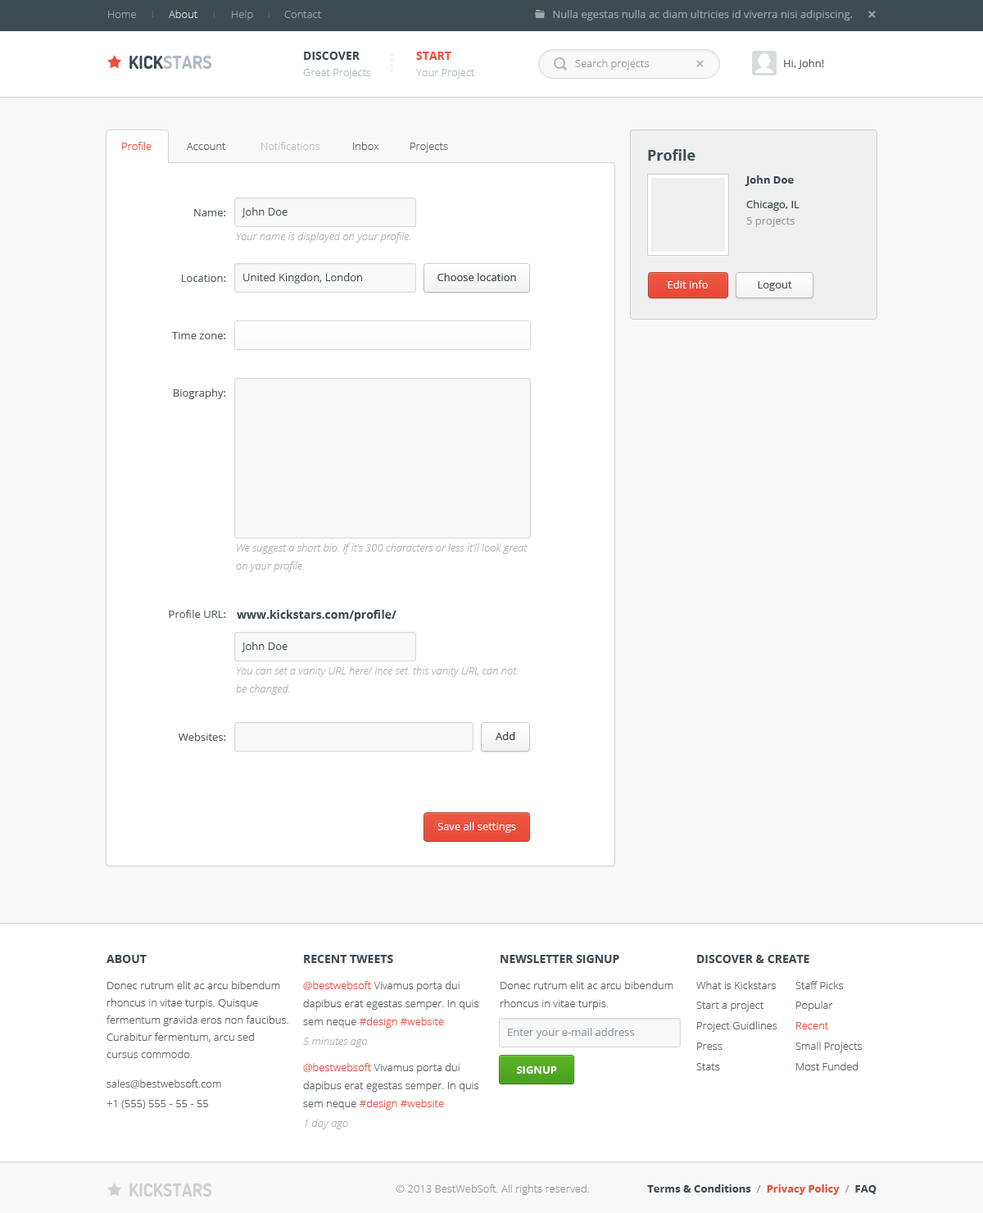
<style>
.page{position:relative;width:983px;height:1213px;background:#f9f9f9}
.page>*{position:absolute;margin:0}
.t1{font:10.7px "OpenSans-Light";color:#9fa5a8}
.t2{font:10.7px "OpenSans-Light";color:#d8dbdc}
.t3{font:10.7px "OpenSans";color:#9fa5a8}
.t4{font:11.5px "OpenSans-Bold";color:#3e4b51;text-transform:uppercase}
.t5{font:11.5px "OpenSans-Bold";color:#ea503d;text-transform:uppercase}
.t6{font:18px "Dosis-Bold";color:#afbbc1;text-transform:uppercase}
.t7{font:18px "Dosis-Bold";color:#3e4b51;text-transform:uppercase}
.t8{font:10.7px "OpenSans-Light";color:#909da3}
.t9{font:10.7px "OpenSans";color:#5c666b}
.t10{font:10.7px "OpenSans-Light";color:#afbbc1}
.t11{font:10.7px "OpenSans-Light";color:#ea503d}
.t12{font:10.7px "OpenSans-Light";color:#5c666b}
.t13{font:10.7px "OpenSans-Light";color:#babec0}
.t14{font:14.7px "OpenSans-Bold";color:#3e4b51}
.t15{font:10.7px "OpenSans-Bold";color:#3e4b51}
.t16{font:10.7px "OpenSans";color:#3e4b51}
.t17{font:10.7px "OpenSans";color:#979da0}
.t18{font:10.7px "OpenSansLight-Italic";color:#adb2b5}
.t19{font:10.7px "OpenSans";color:#ffffff}
.t20{font:10.7px "OpenSans";color:#575757}
.t21{font:10.7px/18px "OpenSansLight-Italic";color:#adb2b5}
.t22{font:11.5px "OpenSans-Bold";color:#3e4b51}
.t23{font:11.5px "OpenSans-Bold";color:#3e4a51;text-transform:uppercase}
.t24{font:10.7px/17.2px "OpenSans-Light";color:#5c666b}
.t25{font:10.7px/18px "OpenSans-Light";color:#5c666b}
.t26{font:10.7px/18px "OpenSans-Light";color:#ea503d}
.t27{font:10.7px "OpenSans";color:#909da3}
.t28{font:10.7px "OpenSans-Bold";color:#ffffff;text-transform:uppercase}
.t29{font:18px "Dosis-Bold";color:#cecece;text-transform:uppercase}
.t30{font:10.7px "OpenSans-Light";color:#999999}
.t31{font:10.7px "OpenSans-Bold";color:#3e4a51}
.t32{font:10.7px "OpenSans-Bold";color:#aeaeae}
.t33{font:10.7px "OpenSans-Bold";color:#ea503d}
</style>
<div class="page">
<p class="t1" style="left:108px;top:11px;width:28px;height:7px">Home</p>
<p class="t2" style="left:169px;top:10px;width:28px;height:8px">About</p>
<p class="t1" style="left:232px;top:10px;width:21px;height:10px">Help</p>
<p class="t1" style="left:284px;top:11px;width:37px;height:7px">Contact</p>
<p class="t3" style="left:553px;top:10px;width:300px;height:10px">Nulla egestas nulla ac diam ultricies id viverra nisi adipiscing.</p>
<p class="t4" style="left:304px;top:52px;width:56px;height:8px">Discover</p>
<p class="t5" style="left:416px;top:52px;width:35px;height:8px">Start</p>
<p class="t6" style="left:129px;top:56px;width:83px;height:13px"><span class="t7">Kick</span>stars</p>
<p class="t8" style="left:575px;top:59px;width:74px;height:11px">Search projects</p>
<p class="t9" style="left:784px;top:59px;width:40px;height:10px">Hi, John!</p>
<p class="t10" style="left:303px;top:69px;width:68px;height:10px">Great Projects</p>
<p class="t10" style="left:416px;top:69px;width:59px;height:10px">Your Project</p>
<p class="t11" style="left:122px;top:142px;width:30px;height:8px">Profile</p>
<p class="t12" style="left:187px;top:143px;width:39px;height:7px">Account</p>
<p class="t13" style="left:261px;top:142px;width:59px;height:8px">Notifications</p>
<p class="t12" style="left:353px;top:142px;width:26px;height:8px">Inbox</p>
<p class="t12" style="left:411px;top:143px;width:37px;height:9px">Projects</p>
<p class="t14" style="left:648px;top:149px;width:48px;height:12px">Profile</p>
<p class="t15" style="left:745px;top:175px;width:49px;height:11px">John Doe</p>
<p class="t9" style="left:194px;top:209px;width:32px;height:7px">Name:</p>
<p class="t16" style="left:242px;top:207px;width:46px;height:11px">John Doe</p>
<p class="t16" style="left:746px;top:200px;width:54px;height:11px">Chicago, IL</p>
<p class="t17" style="left:746px;top:217px;width:49px;height:10px">5 projects</p>
<p class="t18" style="left:237px;top:232px;width:174px;height:11px">Your name is displayed on your profile.</p>
<p class="t9" style="left:181px;top:274px;width:45px;height:8px">Location:</p>
<p class="t16" style="left:243px;top:273px;width:119px;height:11px">United Kingdon, London</p>
<p class="t16" style="left:438px;top:273px;width:78px;height:8px">Choose location</p>
<p class="t19" style="left:668px;top:280px;width:40px;height:8px">Edit info</p>
<p class="t20" style="left:758px;top:281px;width:34px;height:10px">Logout</p>
<p class="t9" style="left:172px;top:332px;width:54px;height:7px">Time zone:</p>
<p class="t9" style="left:173px;top:388px;width:53px;height:11px">Biography:</p>
<p class="t21" style="left:236px;top:543px;width:292px;height:29px">We suggest a short bio. If it’s 300 characters or less it’ll look great on your profile.</p>
<p class="t9" style="left:169px;top:610px;width:57px;height:8px">Profile URL:</p>
<p class="t22" style="left:237px;top:610px;width:160px;height:11px">www.kickstars.com/profile/</p>
<p class="t16" style="left:242px;top:642px;width:46px;height:10px">John Doe</p>
<p class="t21" style="left:236px;top:666px;width:281px;height:29px">You can set a vanity URL here/ Ince set. this vanity URL can not be changed.</p>
<p class="t9" style="left:178px;top:733px;width:48px;height:8px">Websites:</p>
<p class="t16" style="left:496px;top:732px;width:19px;height:8px">Add</p>
<p class="t19" style="left:438px;top:822px;width:78px;height:11px">Save all settings</p>
<p class="t23" style="left:107px;top:955px;width:40px;height:8px">About</p>
<p class="t23" style="left:304px;top:955px;width:89px;height:8px">Recent Tweets</p>
<p class="t23" style="left:501px;top:955px;width:118px;height:8px">Newsletter Signup</p>
<p class="t23" style="left:697px;top:955px;width:113px;height:8px">Discover &amp; Create</p>
<p class="t24" style="left:107px;top:981px;width:181px;height:77px">Donec rutrum elit ac arcu bibendum rhoncus in vitae turpis. Quisque fermentum gravida eros non faucibus. Curabitur fermentum, arcu sed cursus commodo.</p>
<p class="t25" style="left:303px;top:981px;width:176px;height:47px"><span class="t26">@bestwebsoft</span> Vivamus porta dui dapibus erat egestas semper. In quis sem neque <span class="t26">#design #website</span></p>
<p class="t25" style="left:501px;top:981px;width:173px;height:28px">Donec rutrum elit ac arcu bibendum rhoncus in vitae turpis.</p>
<p class="t12" style="left:696px;top:981px;width:80px;height:8px">What is Kickstars</p>
<p class="t12" style="left:796px;top:981px;width:47px;height:8px">Staff Picks</p>
<p class="t12" style="left:696px;top:1001px;width:68px;height:10px">Start a project</p>
<p class="t12" style="left:796px;top:1000px;width:37px;height:11px">Popular</p>
<p class="t12" style="left:697px;top:1021px;width:81px;height:11px">Project Guidlines</p>
<p class="t11" style="left:796px;top:1022px;width:32px;height:7px">Recent</p>
<p class="t18" style="left:303px;top:1037px;width:65px;height:10px">5 minutes ago</p>
<p class="t27" style="left:508px;top:1028px;width:127px;height:10px">Enter your e-mail address</p>
<p class="t12" style="left:697px;top:1042px;width:26px;height:8px">Press</p>
<p class="t12" style="left:796px;top:1041px;width:66px;height:11px">Small Projects</p>
<p class="t12" style="left:796px;top:1062px;width:62px;height:8px">Most Funded</p>
<p class="t25" style="left:303px;top:1063px;width:176px;height:46px"><span class="t26">@bestwebsoft </span>Vivamus porta dui dapibus erat egestas semper. In quis sem neque <span class="t26">#design #website</span></p>
<p class="t28" style="left:517px;top:1066px;width:40px;height:7px">Signup</p>
<p class="t12" style="left:696px;top:1063px;width:24px;height:7px">Stats</p>
<p class="t12" style="left:107px;top:1079px;width:114px;height:9px">sales@bestwebsoft.com</p>
<p class="t12" style="left:107px;top:1100px;width:101px;height:9px">+1 (555) 555 - 55 - 55</p>
<p class="t18" style="left:305px;top:1118px;width:43px;height:11px">1 day ago</p>
<p class="t29" style="left:129px;top:1183px;width:83px;height:13px">Kickstars</p>
<p class="t30" style="left:396px;top:1184px;width:193px;height:11px">© 2013 BestWebSoft. All rights reserved.</p>
<p class="t31" style="left:647px;top:1184px;width:230px;height:11px">Terms &amp; Conditions <span class="t32"> /  </span><span class="t33">Privacy Policy  </span><span class="t32">/  </span>FAQ</p>
</div>
